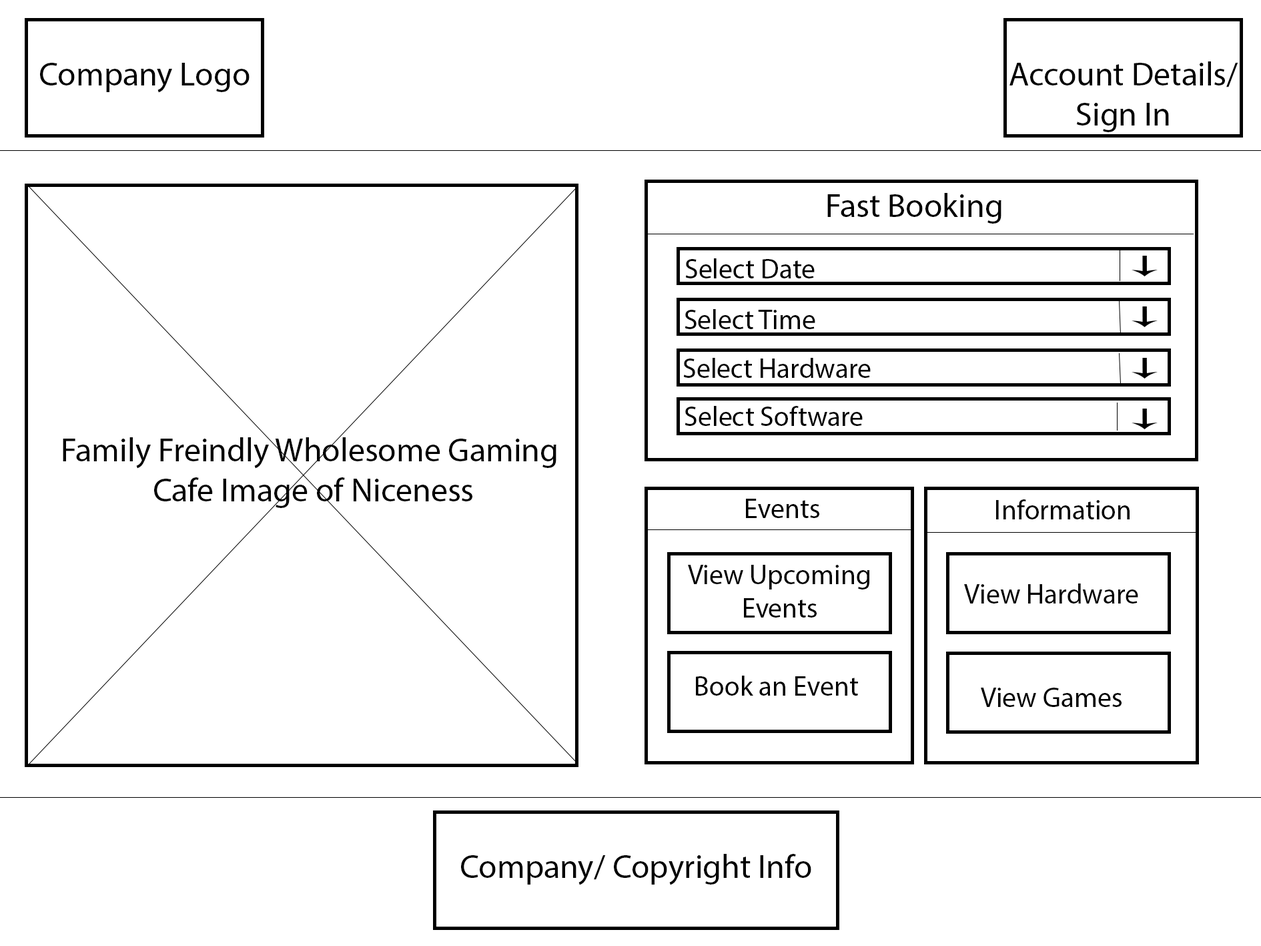
<style>
.page{position:relative;width:1261px;height:946px;background:#ffffff}
.page>*{position:absolute;margin:0}
.t1{font:33.4px "MyriadPro-Regular";color:#000000}
.t2{font:38.9px "MyriadPro-Regular";color:#000000}
.t3{font:8px "MyriadPro-Regular";color:#000000}
.t4{font:27.8px "MyriadPro-Regular";color:#000000}
</style>
<div class="page">
<p class="t1" style="left:40px;top:63px;width:210px;height:30px"><span class="t2"><br></span>Company Logo</p>
<p class="t1" style="left:1010px;top:61px;width:228px;height:71px;text-align:center"><span class="t2"><br></span>Account Details/ Sign In</p>
<p class="t3" style="left:827px;top:193px;width:175px;height:31px;text-align:center">Fast Booking</p>
<p class="t4" style="left:685px;top:258px;width:130px;height:20px">Select Date</p>
<p class="t4" style="left:685px;top:309px;width:130px;height:20px">Select Time</p>
<p class="t4" style="left:683px;top:358px;width:188px;height:20px">Select Hardware</p>
<p class="t4" style="left:685px;top:406px;width:178px;height:20px">Select Software</p>
<p class="t3" style="left:63px;top:437px;width:494px;height:71px;text-align:center">Family Freindly Wholesome Gaming <br>Cafe Image of Niceness</p>
<p class="t4" style="left:746px;top:498px;width:73px;height:20px">Events</p>
<p class="t4" style="left:996px;top:499px;width:134px;height:20px">Information</p>
<p class="t4" style="left:688px;top:565px;width:182px;height:52px;text-align:center">View Upcoming <br>Events</p>
<p class="t4" style="left:964px;top:583px;width:174px;height:20px">View Hardware</p>
<p class="t4" style="left:696px;top:675px;width:162px;height:20px">Book an Event</p>
<p class="t4" style="left:981px;top:687px;width:141px;height:20px">View Games</p>
<p class="t1" style="left:461px;top:853px;width:350px;height:32px"><span class="t2"><br></span>Company/ Copyright Info</p>
</div>
